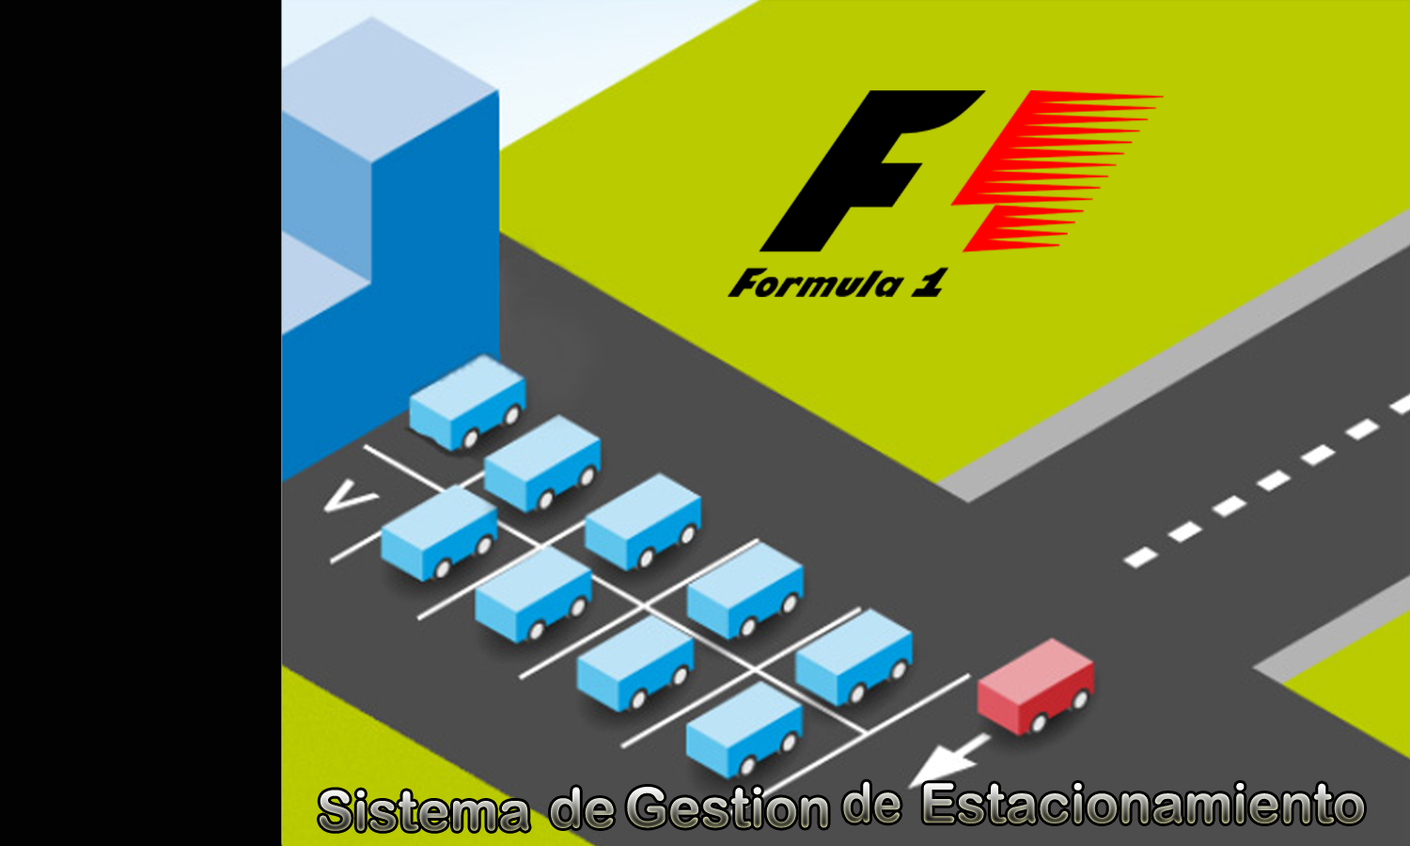
<style>
.page{position:relative;width:1410px;height:846px;background:#4d4d4d}
.page>*{position:absolute;margin:0}
.t1{font:54.8px "ArialRoundedMTBold";scale:0.9 1}
.t2{font:54.8px "ArialRoundedMTBold"}
</style>
<div class="page">
<p class="t1" style="left:843px;top:781px;width:57px;height:42px">de</p>
<p class="t2" style="left:923px;top:783px;width:441px;height:40px">Estacionamiento</p>
<p class="t2" style="left:320px;top:789px;width:209px;height:42px">Sistema</p>
<p class="t2" style="left:551px;top:787px;width:63px;height:41px">de</p>
<p class="t2" style="left:627px;top:787px;width:201px;height:41px">Gestion</p>
</div>
